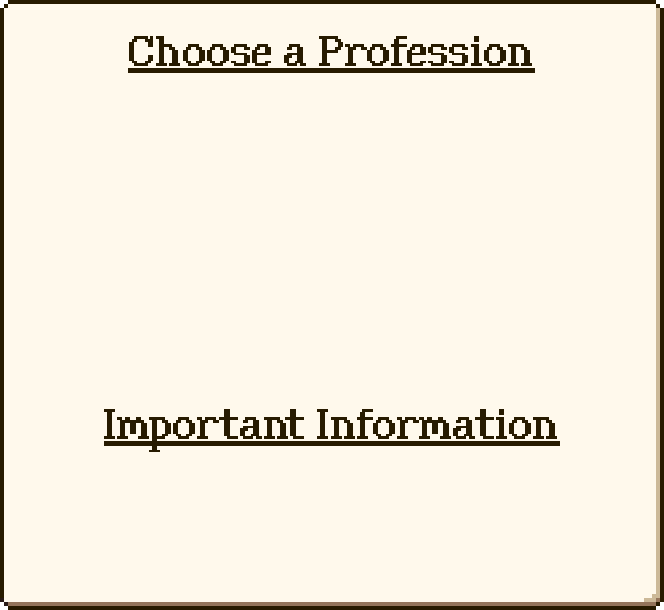
<style>
.page{position:relative;width:664px;height:610px;background:#fff9ec}
.page>*{position:absolute;margin:0}
.t1{font:42.7px "ChevyRay---Classified";color:#281b00}
</style>
<div class="page">
<p class="t1" style="left:129px;top:36px;width:403px;height:30px">Choose a Profession</p>
<p class="t1" style="left:104px;top:409px;width:453px;height:43px">Important Information</p>
</div>
